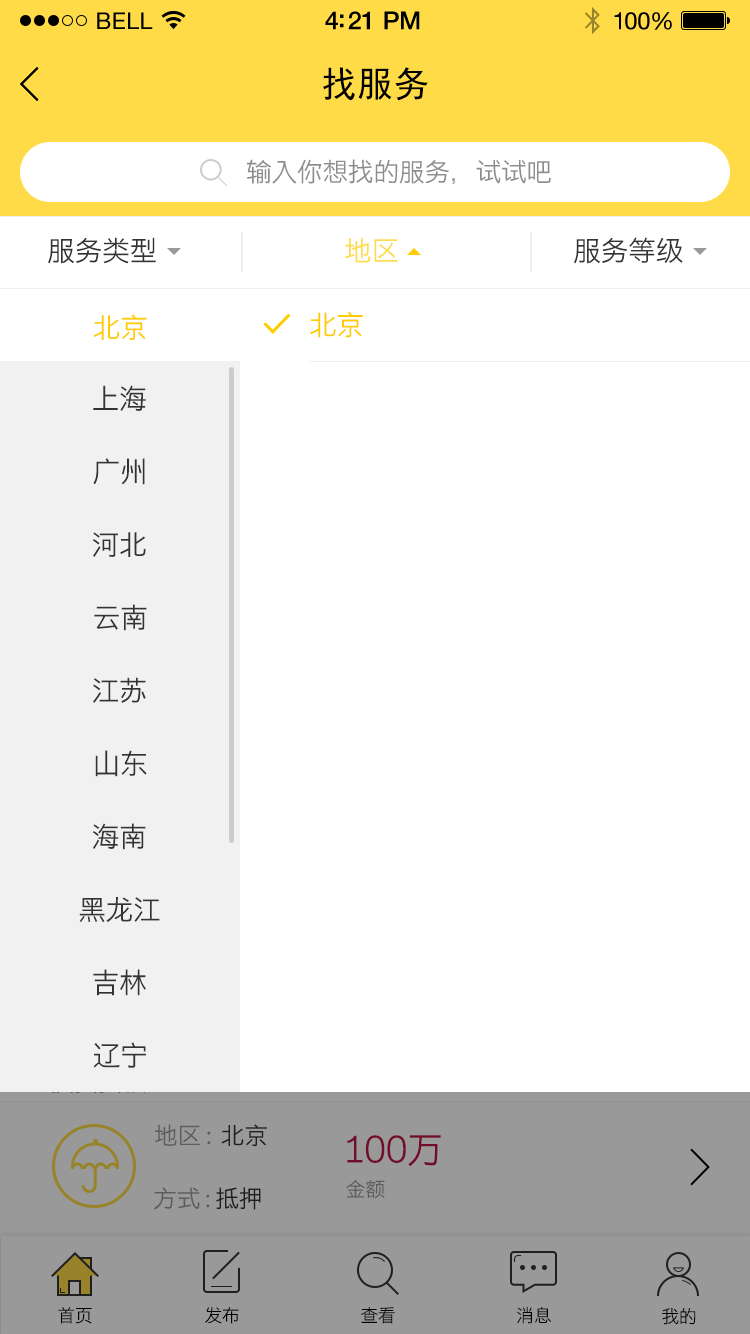
<style>
.page{position:relative;width:750px;height:1334px;background:#ffffff}
.page>*{position:absolute;margin:0}
.t1{font:23px "HelveticaNeue";letter-spacing:0.02em;color:#000000}
.t2{font:25px "HelveticaNeue-Medium";letter-spacing:-0.02em;color:#000000}
.t3{font:24px "HelveticaNeue";letter-spacing:-0.02em;color:#010101}
.t4{font:36px "SimHei";color:#000000}
.t5{font:26px "STHeitiSC-Light";letter-spacing:-0.02em;color:#8d8d8d}
.t6{font:28px "STHeitiSC-Light";letter-spacing:-0.02em;color:#333333}
.t7{font:28px "STHeitiSC-Light";letter-spacing:-0.02em;color:#fedb47}
.t8{font:28px "STHeitiSC-Light";letter-spacing:-0.02em;color:#353535}
.t9{font:28px "STHeitiSC-Light";letter-spacing:-0.02em;color:#ffcc00}
.t10{font:24px "STHeitiSC-Light";letter-spacing:-0.02em}
.t11{font:36px "STHeitiSC-Light";letter-spacing:-0.02em;color:#730c29}
.t12{font:20px "STHeitiSC-Light";letter-spacing:-0.02em}
.t13{font:20px "STHeitiSC-Light";letter-spacing:-0.02em;color:#5c5c5c}
.t14{font:24px "STHeitiSC-Light";letter-spacing:-0.02em;color:#999999}
.t15{font:24px "STHeitiSC-Light";letter-spacing:-0.02em;color:#333333}
.t16{font:18px "STHeitiSC-Light";letter-spacing:-0.02em;color:#000000}
</style>
<div class="page">
<p class="t1" style="left:97px;top:12px;width:56px;height:17px">BELL</p>
<p class="t1" style="left:97px;top:12px;width:56px;height:17px">BELL</p>
<p class="t2" style="left:325px;top:11px;width:95px;height:19px">4:21 PM</p>
<p class="t2" style="left:325px;top:11px;width:95px;height:19px">4:21 PM</p>
<p class="t3" style="left:614px;top:12px;width:58px;height:18px">100%</p>
<p class="t3" style="left:614px;top:12px;width:58px;height:18px">100%</p>
<p class="t4" style="left:323px;top:67px;width:105px;height:34px">找服务</p>
<p class="t5" style="left:247px;top:159px;width:304px;height:25px">输入你想找的服务，试试吧</p>
<p class="t6" style="left:48px;top:237px;width:108px;height:27px">服务类型</p>
<p class="t7" style="left:345px;top:237px;width:53px;height:26px">地区</p>
<p class="t8" style="left:574px;top:237px;width:109px;height:27px">服务等级</p>
<p class="t9" style="left:93px;top:314px;width:54px;height:26px">北京</p>
<p class="t9" style="left:310px;top:311px;width:53px;height:27px">北京</p>
<p class="t6" style="left:93px;top:385px;width:53px;height:26px">上海</p>
<p class="t6" style="left:93px;top:458px;width:52px;height:27px">广州</p>
<p class="t6" style="left:92px;top:532px;width:54px;height:25px">河北</p>
<p class="t6" style="left:94px;top:604px;width:53px;height:27px">云南</p>
<p class="t6" style="left:93px;top:677px;width:53px;height:26px">江苏</p>
<p class="t6" style="left:95px;top:750px;width:52px;height:27px">山东</p>
<p class="t6" style="left:93px;top:823px;width:53px;height:27px">海南</p>
<p class="t6" style="left:79px;top:897px;width:81px;height:26px">黑龙江</p>
<p class="t6" style="left:93px;top:969px;width:53px;height:27px">吉林</p>
<p class="t6" style="left:93px;top:1042px;width:53px;height:26px">辽宁</p>
<p class="t10" style="left:155px;top:1125px;width:112px;height:23px">地区 :  北京</p>
<p class="t10" style="left:155px;top:1124px;width:112px;height:23px">地区 :  北京</p>
<p class="t11" style="left:347px;top:1136px;width:94px;height:32px">100万</p>
<p class="t11" style="left:347px;top:1135px;width:94px;height:32px">100万</p>
<p class="t12" style="left:346px;top:1180px;width:39px;height:20px">金额</p>
<p class="t13" style="left:346px;top:1179px;width:39px;height:20px">金额</p>
<p class="t14" style="left:154px;top:1187px;width:107px;height:23px">方式 : <span class="t15">抵押</span></p>
<p class="t14" style="left:155px;top:1187px;width:111px;height:23px">方式 :  <span class="t15">抵押</span></p>
<p class="t16" style="left:58px;top:1307px;width:34px;height:17px">首页</p>
<p class="t16" style="left:205px;top:1307px;width:34px;height:17px">发布</p>
<p class="t16" style="left:361px;top:1307px;width:34px;height:17px">查看</p>
<p class="t16" style="left:517px;top:1306px;width:34px;height:18px">消息</p>
<p class="t16" style="left:662px;top:1308px;width:34px;height:17px">我的</p>
</div>
